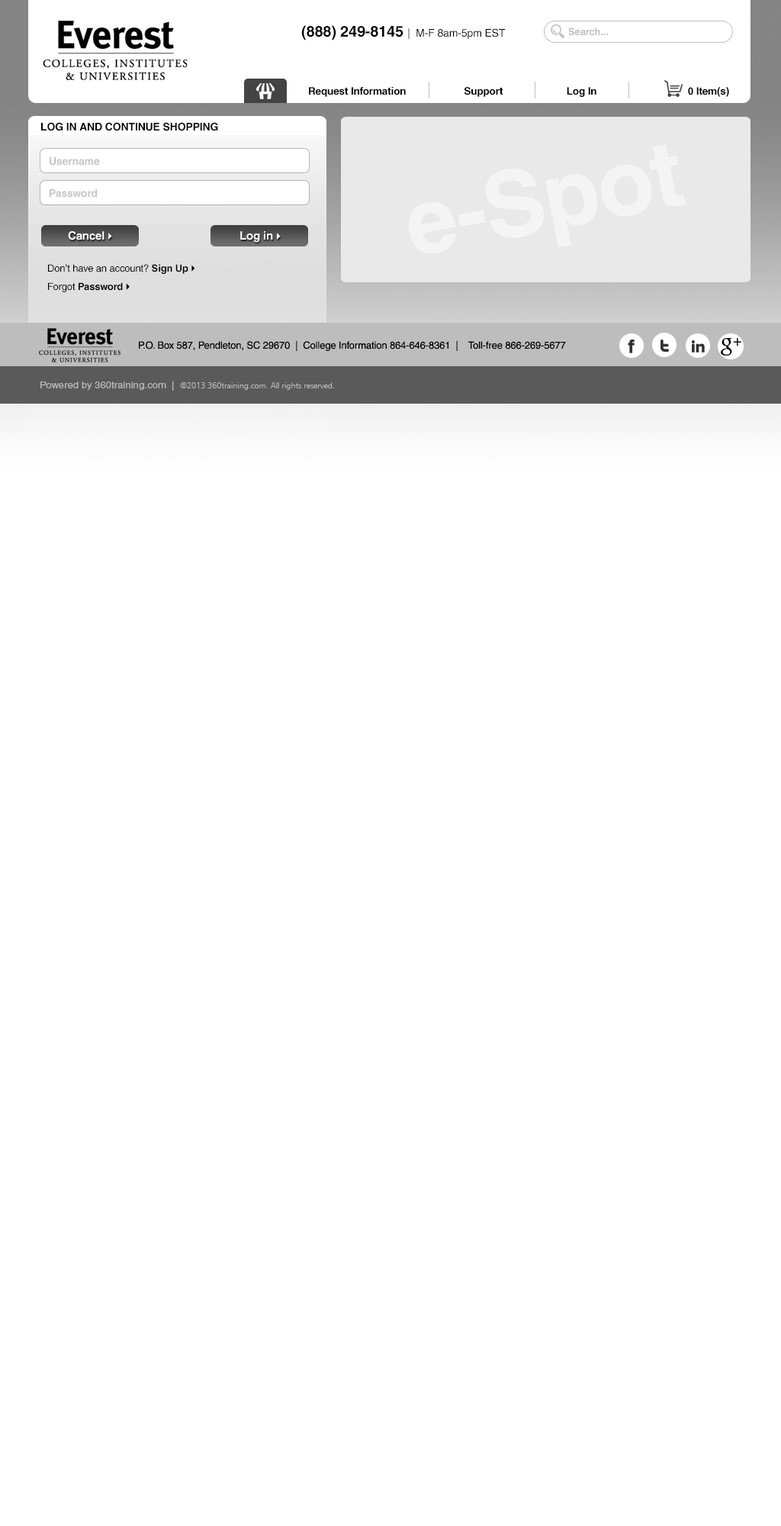
<style>
.page{position:relative;width:781px;height:1526px;background:#ffffff}
.page>*{position:absolute;margin:0}
.t1{font:10.7px "Helvetica";letter-spacing:-0.01em;color:#000000}
.t2{font:15.3px "Helvetica-Bold";letter-spacing:-0.01em;color:#000000}
.t3{font:9.9px "Helvetica-Bold";letter-spacing:-0.01em;color:#bebebe}
.t4{font:10.3px "Helvetica-Bold";letter-spacing:-0.01em;color:#000000}
.t5{font:10.7px "Helvetica-Bold";letter-spacing:-0.01em;color:#000000}
.t6{font:91.6px "Helvetica-Bold";letter-spacing:-0.01em;color:#ffffff}
.t7{font:10.7px "Helvetica-Bold";letter-spacing:-0.01em;color:#c5c5c5}
.t8{font:11.4px "Helvetica-Bold";letter-spacing:-0.01em;color:#ffffff}
.t9{font:9.2px "Wingdings3";letter-spacing:-0.01em;color:#ffffff}
.t10{font:9.9px/18.3px "Helvetica";letter-spacing:-0.01em;color:#000000}
.t11{font:9.9px/18.3px "Helvetica-Bold";letter-spacing:-0.01em;color:#000000}
.t12{font:9.2px/18.3px "Wingdings3";letter-spacing:-0.01em;color:#000000}
.t13{font:9.9px "Helvetica";letter-spacing:-0.01em;color:#000000}
.t14{font:8.4px "Humanist777BT-LightB";letter-spacing:-0.01em;color:#b9b9b9}
.t15{font:9.2px "Helvetica";color:#b9b9b9;scale:1.1 1}
</style>
<div class="page">
<p class="t1" style="left:301px;top:25px;width:205px;height:15px"><span class="t2">(888) 249-8145 </span>|  M-F 8am-5pm EST</p>
<p class="t3" style="left:568px;top:27px;width:40px;height:9px">Search...</p>
<p class="t4" style="left:309px;top:87px;width:420px;height:10px">Request Information                     Support                       Log In                                 0 Item(s)</p>
<p class="t5" style="left:41px;top:122px;width:177px;height:9px">LOG IN AND CONTINUE SHOPPING</p>
<p class="t6" style="left:408px;top:144px;width:278px;height:110px;rotate:-11deg;opacity:0.47">e-Spot</p>
<p class="t7" style="left:50px;top:157px;width:50px;height:9px">Username</p>
<p class="t7" style="left:50px;top:189px;width:48px;height:9px">Password</p>
<p class="t8" style="left:68px;top:231px;width:44px;height:9px">Cancel <span class="t9">}</span></p>
<p class="t8" style="left:240px;top:231px;width:41px;height:12px">Log in <span class="t9">}</span></p>
<p class="t10" style="left:48px;top:264px;width:147px;height:28px">Don’t have an account? <span class="t11">Sign Up </span><span class="t12">}<br></span>Forgot <span class="t11">Password </span><span class="t12">}</span></p>
<p class="t13" style="left:139px;top:340px;width:427px;height:11px">P.O. Box 587, Pendleton, SC 29670  |  College Information 864-646-8361  |    Toll-free 866-269-5677</p>
<p class="t14" style="left:40px;top:381px;width:294px;height:10px"><span class="t15">Powered by 360training.com  |  </span>©2013 360training.com. All rights reserved.</p>
</div>
